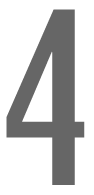
<style>
.page{position:relative;width:94px;height:195px;background:#ffffff}
.page>*{position:absolute;margin:0}
.t1{font:260px "GillSansMT-Condensed";color:#666666}
</style>
<div class="page">
<p class="t1" style="left:6px;top:9px;width:79px;height:176px">4</p>
</div>
